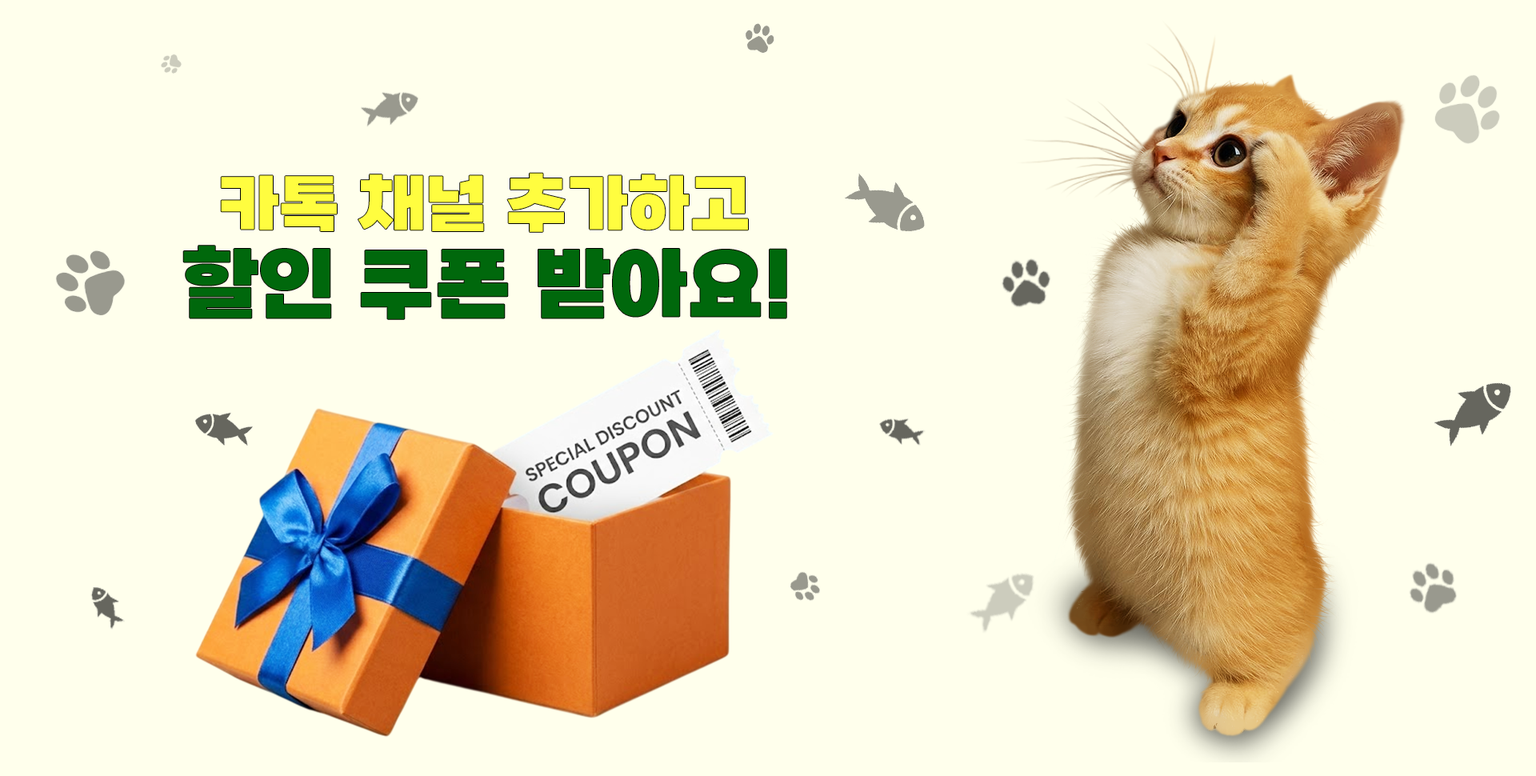
<style>
.page{position:relative;width:1536px;height:776px;background:#ffffec}
.page>*{position:absolute;margin:0}
.t1{font:64px "SBAggroB";color:#fffd3f;text-transform:uppercase}
.t2{font:80px "SBAggroB";color:#00680c;text-transform:uppercase}
</style>
<div class="page">
<p class="t1" style="left:221px;top:173px;width:527px;height:59px">카톡 채널 추가하고</p>
<p class="t2" style="left:183px;top:246px;width:604px;height:73px">할인 쿠폰 받아요!</p>
</div>
